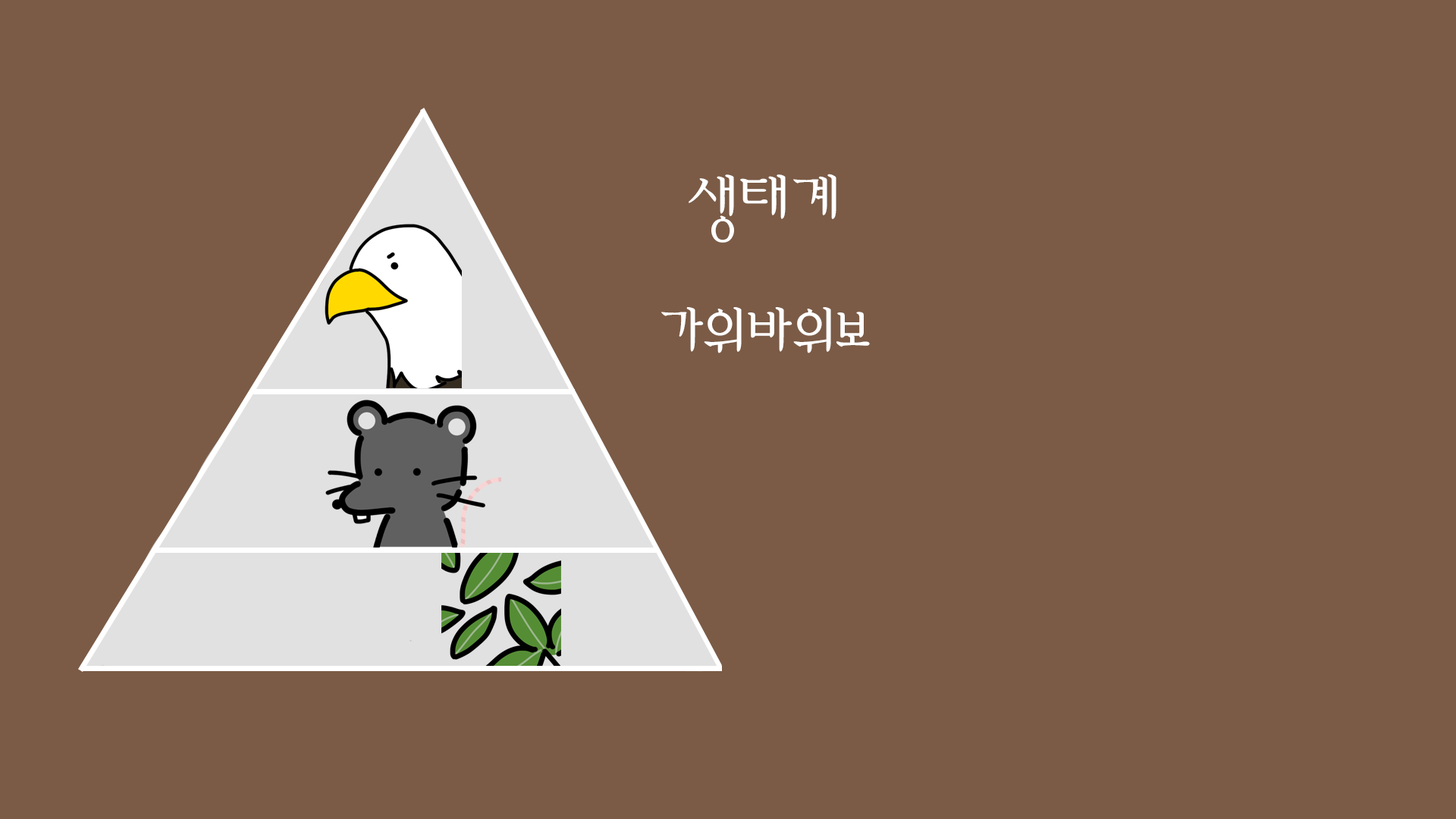
<style>
.page{position:relative;width:1456px;height:819px;background:#7b5b46}
.page>*{position:absolute;margin:0}
.t1{font:75.8px "AmiR-HM";color:#ffffff}
</style>
<div class="page">
<p class="t1" style="left:661px;top:174px;width:209px;height:179px;text-align:center">생태계<br>가위바위보</p>
</div>
